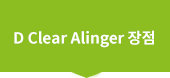
<style>
.page{position:relative;width:170px;height:78px;background:#8cbe21}
.page>*{position:absolute;margin:0}
.t1{font:15.4px "NotoSansCJKkr-Bold";color:#ffffff}
</style>
<div class="page">
<p class="t1" style="left:14px;top:30px;width:140px;height:18px">D Clear Alinger 장점</p>
</div>
